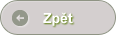
<style>
.page{position:relative;width:116px;height:35px;background:#d4cfcf}
.page>*{position:absolute;margin:0}
.t1{font:14px "Arial-BoldMT";color:#ffffff}
</style>
<div class="page">
<p class="t1" style="left:43px;top:12px;width:30px;height:14px">Zpět</p>
</div>
